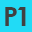
<style>
.page{position:relative;width:32px;height:32px;background:#21dbf6}
.page>*{position:absolute;margin:0}
.t1{font:27.5px "CenturyGothic-Bold";letter-spacing:-0.1em;color:#414141}
.t2{font:27.5px "CenturyGothic-Bold";letter-spacing:0.14em;color:#414141}
</style>
<div class="page">
<p class="t1" style="left:5px;top:7px;width:21px;height:19px">P <span class="t2">1</span></p>
</div>
